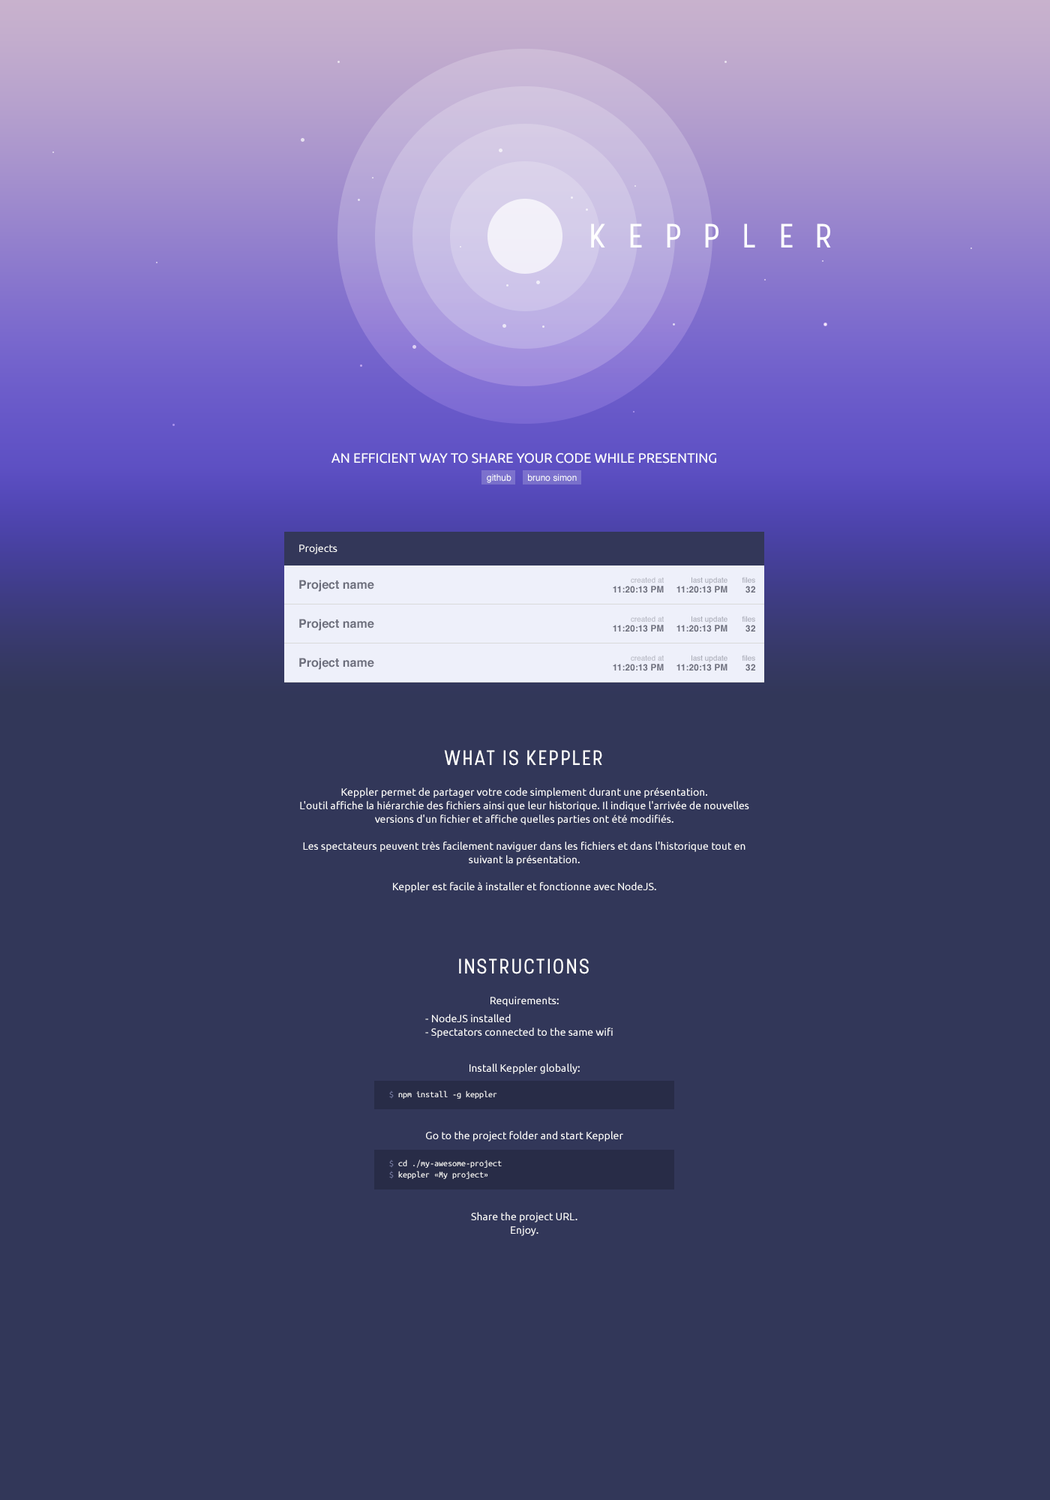
<style>
.page{position:relative;width:1050px;height:1500px;background:#323759}
.page>*{position:absolute;margin:0}
.t1{font:33.8px "Stellar-Regular";color:#ffffff}
.t2{font:13.5px "Ubuntu";color:#ffffff}
.t3{font:9px "Helvetica";color:#ffffff}
.t4{font:10.5px "Ubuntu";color:#ffffff}
.t5{font:12px "Helvetica-Bold";color:#6c6e7c}
.t6{font:7.5px "Helvetica";color:#b4b6c1}
.t7{font:7.5px "Helvetica";color:#a7a9b5}
.t8{font:9px "Helvetica-Bold";color:#6c6e7c}
.t9{font:21px "Stellar-Regular";letter-spacing:0.05em;color:#ffffff}
.t10{font:10.5px/13.5px "Ubuntu";color:#ffffff}
.t11{font:9px "UbuntuMono-Regular";color:#ffffff}
.t12{font:9px "UbuntuMono-Regular";color:#787da4}
.t13{font:9px/11.2px "UbuntuMono-Regular";color:#ffffff}
.t14{font:9px/11.2px "UbuntuMono-Regular";color:#787da4}
</style>
<div class="page">
<p class="t1" style="left:591px;top:224px;width:14px;height:24px">K</p>
<p class="t1" style="left:630px;top:224px;width:12px;height:24px">E</p>
<p class="t1" style="left:667px;top:224px;width:13px;height:24px">P</p>
<p class="t1" style="left:705px;top:224px;width:13px;height:24px">P</p>
<p class="t1" style="left:744px;top:224px;width:11px;height:24px">L</p>
<p class="t1" style="left:781px;top:224px;width:12px;height:24px">E</p>
<p class="t1" style="left:817px;top:224px;width:14px;height:24px">R</p>
<p class="t2" style="left:332px;top:453px;width:384px;height:11px">AN EFFICIENT WAY TO SHARE YOUR CODE WHILE PRESENTING</p>
<p class="t3" style="left:487px;top:474px;width:25px;height:9px">github</p>
<p class="t3" style="left:528px;top:474px;width:49px;height:8px">bruno simon</p>
<p class="t4" style="left:299px;top:544px;width:39px;height:10px">Projects</p>
<p class="t5" style="left:299px;top:580px;width:75px;height:12px">Project name</p>
<p class="t6" style="left:631px;top:577px;width:33px;height:6px">created at</p>
<p class="t7" style="left:692px;top:577px;width:36px;height:7px">last update</p>
<p class="t7" style="left:742px;top:577px;width:13px;height:6px">files</p>
<p class="t8" style="left:613px;top:586px;width:51px;height:7px">11:20:13 PM</p>
<p class="t8" style="left:676px;top:586px;width:52px;height:7px">11:20:13 PM</p>
<p class="t8" style="left:746px;top:586px;width:9px;height:7px">32</p>
<p class="t6" style="left:631px;top:616px;width:33px;height:6px">created at</p>
<p class="t7" style="left:692px;top:616px;width:36px;height:7px">last update</p>
<p class="t7" style="left:742px;top:616px;width:13px;height:6px">files</p>
<p class="t5" style="left:299px;top:619px;width:75px;height:12px">Project name</p>
<p class="t8" style="left:613px;top:625px;width:51px;height:7px">11:20:13 PM</p>
<p class="t8" style="left:676px;top:625px;width:52px;height:7px">11:20:13 PM</p>
<p class="t8" style="left:746px;top:625px;width:9px;height:7px">32</p>
<p class="t5" style="left:299px;top:658px;width:75px;height:12px">Project name</p>
<p class="t8" style="left:613px;top:664px;width:51px;height:7px">11:20:13 PM</p>
<p class="t6" style="left:631px;top:655px;width:33px;height:6px">created at</p>
<p class="t8" style="left:676px;top:664px;width:52px;height:7px">11:20:13 PM</p>
<p class="t7" style="left:692px;top:655px;width:36px;height:7px">last update</p>
<p class="t7" style="left:742px;top:655px;width:13px;height:6px">files</p>
<p class="t8" style="left:746px;top:664px;width:9px;height:7px">32</p>
<p class="t9" style="left:444px;top:750px;width:158px;height:16px">WHAT IS KEPPLER</p>
<p class="t10" style="left:300px;top:788px;width:449px;height:104px;text-align:center">Keppler permet de partager votre code simplement durant une présentation. <br>L'outil affiche la hiérarchie des fichiers ainsi que leur historique. Il indique l'arrivée de nouvelles versions d'un fichier et affiche quelles parties ont été modifiés.<br><br>Les spectateurs peuvent très facilement naviguer dans les fichiers et dans l'historique tout en suivant la présentation.<br><br>Keppler est facile à installer et fonctionne avec NodeJS.</p>
<p class="t9" style="left:459px;top:958px;width:130px;height:16px">INSTRUCTIONS</p>
<p class="t10" style="left:426px;top:996px;width:197px;height:240px;text-align:center">Requirements:<br><br><br><br><br>Install Keppler globally:<br><br><br><br><br>Go to the project folder and start Keppler<br><br><br><br><br><br>Share the project URL.<br>Enjoy.</p>
<p class="t10" style="left:425px;top:1014px;width:188px;height:24px">- NodeJS installed<br>- Spectators connected to the same wifi</p>
<p class="t11" style="left:389px;top:1090px;width:108px;height:9px"><span class="t12">$</span> npm install -g keppler</p>
<p class="t13" style="left:389px;top:1160px;width:113px;height:19px"><span class="t14">$</span> cd ./my-awesome-project<br><span class="t14">$</span> keppler «My project»</p>
</div>
